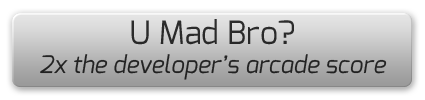
<style>
.page{position:relative;width:425px;height:100px}
.page>*{position:absolute;margin:0}
.t1{font:24px "Exo-Italic";color:#252525}
.t2{font:32px "Exo-Regular";color:#252525}
</style>
<div class="page">
<p class="t1" style="left:40px;top:19px;width:347px;height:61px;text-align:center"><span class="t2">U Mad Bro?<br></span>2x the developer’s arcade score</p>
</div>
